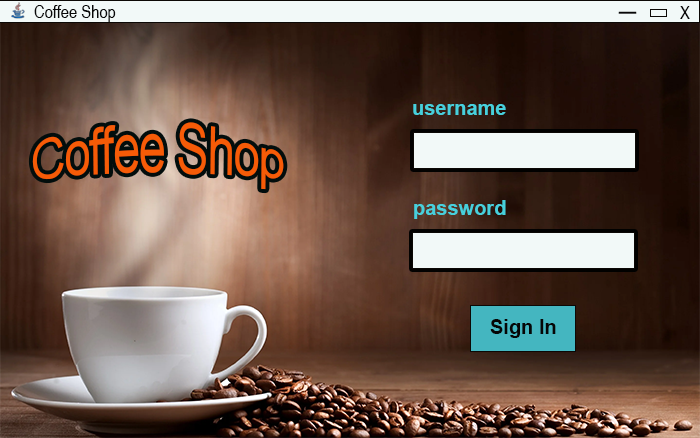
<style>
.page{position:relative;width:700px;height:438px}
.page>*{position:absolute;margin:0}
.t1{font:18px "ArialNarrow";color:#080808}
.t2{font:24px "ArialNarrow";color:#080808}
.t3{font:20px "Arial-BoldMT";color:#47d0dc}
.t4{font:20px "Arial-BoldMT";color:#060606}
</style>
<div class="page">
<p class="t1" style="left:34px;top:5px;width:82px;height:17px">Coffee Shop</p>
<p class="t1" style="left:680px;top:6px;width:10px;height:13px">X</p>
<p class="t2" style="left:618px;top:11px;width:19px;height:3px">─</p>
<p class="t3" style="left:413px;top:104px;width:93px;height:11px">username</p>
<p class="t3" style="left:414px;top:200px;width:92px;height:19px">password</p>
<p class="t4" style="left:490px;top:319px;width:66px;height:19px">Sign In</p>
</div>
